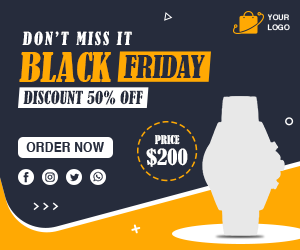
<style>
.page{position:relative;width:300px;height:250px;background:#262c3c}
.page>*{position:absolute;margin:0}
.t1{font:7.4px/9.8px "Helvetica-Bold";color:#ffffff}
.t2{font:16.8px "BernardMT-Condensed";letter-spacing:0.11em;color:#ffffff}
.t3{font:38.5px "BernardMT-Condensed";color:#ffa903}
.t4{font:29.3px "BernardMT-Condensed";color:#262c3c}
.t5{font:16.8px "BernardMT-Condensed";color:#262c3c}
.t6{font:11.3px "BernardMT-Condensed";color:#ffffff}
.t7{font:12.6px "Helvetica-Bold";color:#262c3c}
.t8{font:21px "BernardMT-Condensed";color:#ffffff}
</style>
<div class="page">
<p class="t1" style="left:267px;top:14px;width:23px;height:17px">YOUR <br>LOGO</p>
<p class="t2" style="left:22px;top:31px;width:110px;height:15px">DON’T MISS IT</p>
<p class="t3" style="left:19px;top:52px;width:92px;height:30px">BLACK</p>
<p class="t4" style="left:123px;top:55px;width:82px;height:23px">FRIDAY</p>
<p class="t5" style="left:23px;top:90px;width:120px;height:15px">DISCOUNT 50% OFF</p>
<p class="t6" style="left:155px;top:135px;width:25px;height:10px">PRICE</p>
<p class="t7" style="left:26px;top:142px;width:78px;height:10px">ORDER NOW</p>
<p class="t8" style="left:146px;top:148px;width:42px;height:19px">$200</p>
</div>
